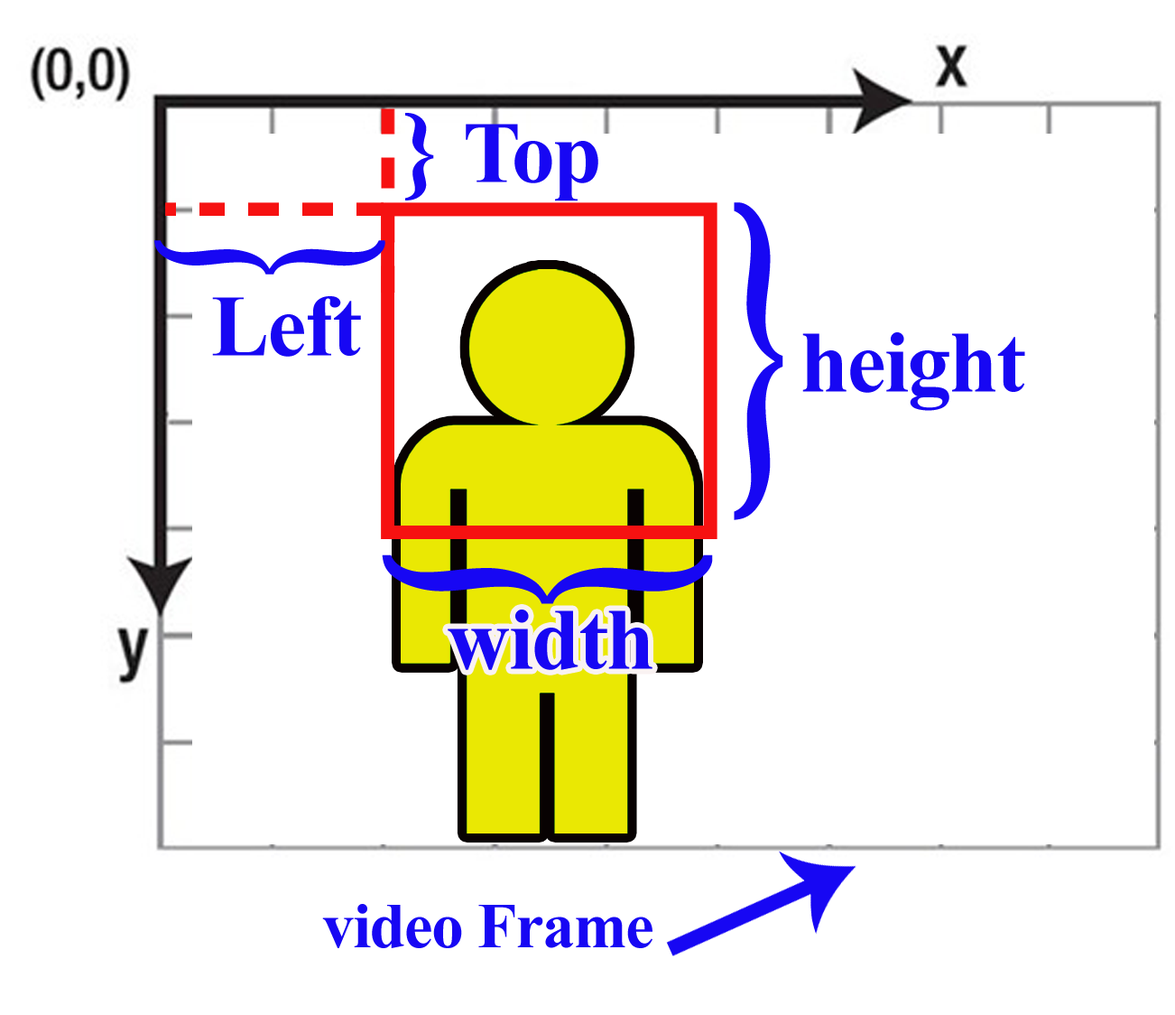
<style>
.page{position:relative;width:1175px;height:1015px;background:#ffffff}
.page>*{position:absolute;margin:0}
.t1{font:99.2px "TimesNewRomanPS-BoldMT";letter-spacing:-0.017em;color:#1707f3;scale:1.04 1}
.t2{font:87.2px "TimesNewRomanPS-BoldMT";letter-spacing:-0.017em;color:#1707f3}
.t3{font:360.4px "TimesNewRomanPS-BoldMT";letter-spacing:-0.017em;color:#1707f3;scale:0.49 1}
.t4{font:262px "TimesNewRomanPS-BoldMT";letter-spacing:-0.017em;color:#1707f3;scale:0.47 1}
.t5{font:374.8px "TimesNewRomanPS-BoldMT";letter-spacing:-0.017em;color:#1707f3;scale:0.47 1}
.t6{font:64px "TimesNewRomanPS-BoldMT";letter-spacing:-0.017em;color:#1707f3}
</style>
<div class="page">
<p class="t1" style="left:405px;top:113px;width:29px;height:87px">}</p>
<p class="t2" style="left:466px;top:124px;width:132px;height:77px">Top</p>
<p class="t3" style="left:734px;top:202px;width:50px;height:318px">}</p>
<p class="t4" style="left:154px;top:240px;width:231px;height:34px;rotate:90deg">}</p>
<p class="t2" style="left:212px;top:296px;width:149px;height:61px">Left</p>
<p class="t2" style="left:802px;top:332px;width:223px;height:79px">height</p>
<p class="t5" style="left:382px;top:554px;width:331px;height:50px;rotate:90deg">}</p>
<p class="t2" style="left:448px;top:609px;width:205px;height:61px">width</p>
<p class="t6" style="left:322px;top:904px;width:331px;height:44px">video Frame</p>
</div>
